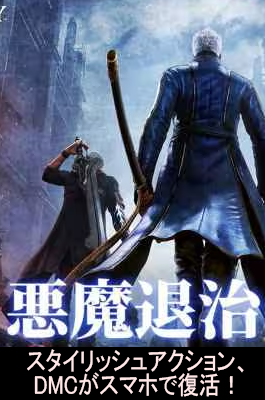
<style>
.page{position:relative;width:265px;height:400px}
.page>*{position:absolute;margin:0}
.t1{font:26px/24px "MS-PGothic";letter-spacing:-0.025em;color:#ffe7e7;scale:0.85 1}
</style>
<div class="page">
<p class="t1" style="left:27px;top:349px;width:217px;height:48px;text-align:center">スタイリッシュアクション、<br>DMCがスマホで復活！</p>
</div>
